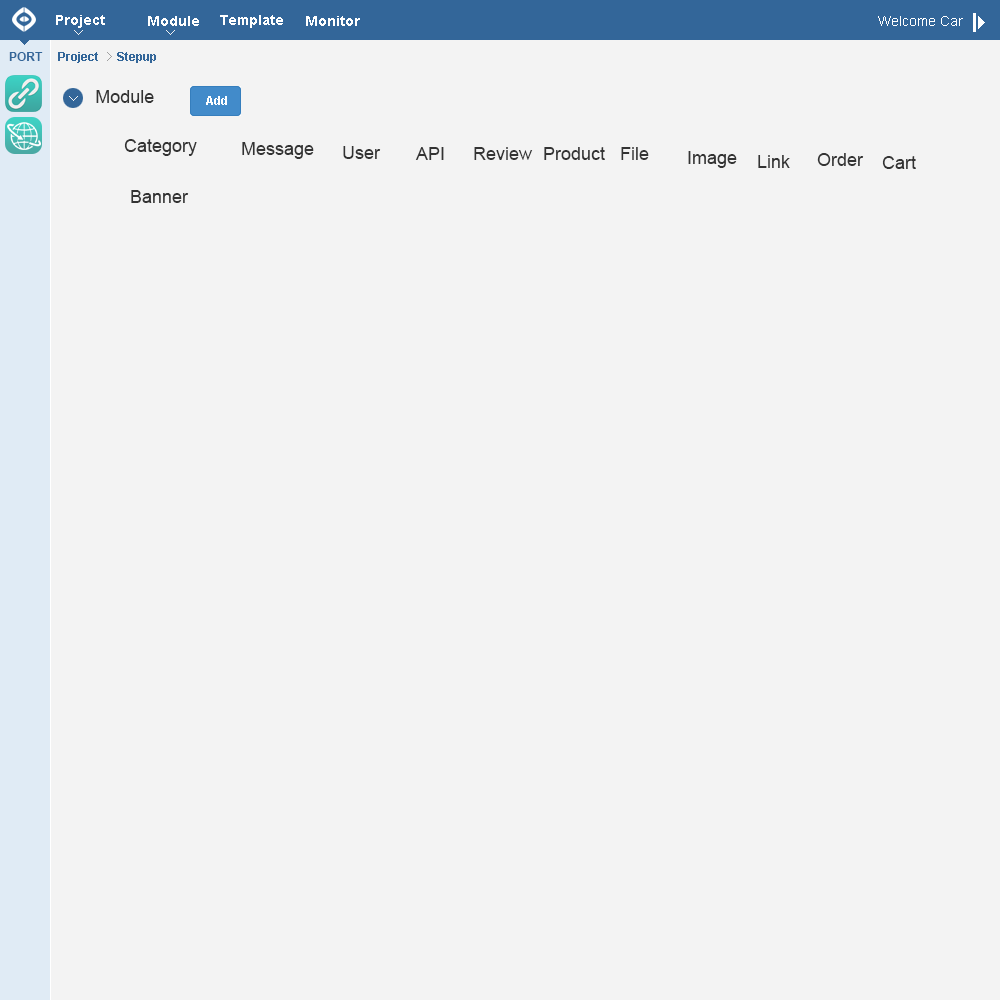
<style>
.page{position:relative;width:1000px;height:1000px;background:#f3f3f3}
.page>*{position:absolute;margin:0}
.t1{font:14px "Arial-BoldMT";color:#ffffff}
.t2{font:14px "ArialMT";color:#ffffff}
.t3{font:12px "Arial-BoldMT";color:#336699}
.t4{font:18px "ArialMT";color:#333333}
.t5{font:12px "Arial-BoldMT";color:#ffffff}
</style>
<div class="page">
<p class="t1" style="left:56px;top:15px;width:49px;height:13px">Project</p>
<p class="t1" style="left:148px;top:16px;width:51px;height:10px">Module</p>
<p class="t1" style="left:220px;top:15px;width:63px;height:13px">Template</p>
<p class="t1" style="left:306px;top:16px;width:54px;height:10px">Monitor</p>
<p class="t2" style="left:878px;top:16px;width:85px;height:10px">Welcome Car</p>
<p class="t3" style="left:9px;top:52px;width:34px;height:9px">PORT</p>
<p class="t3" style="left:58px;top:52px;width:40px;height:11px">Project</p>
<p class="t3" style="left:117px;top:52px;width:39px;height:11px">Stepup</p>
<p class="t4" style="left:96px;top:90px;width:58px;height:13px">Module</p>
<p class="t5" style="left:206px;top:96px;width:21px;height:9px">Add</p>
<p class="t4" style="left:124px;top:139px;width:73px;height:17px">Category</p>
<p class="t4" style="left:242px;top:142px;width:72px;height:17px">Message</p>
<p class="t4" style="left:343px;top:146px;width:38px;height:13px">User</p>
<p class="t4" style="left:415px;top:147px;width:29px;height:13px">API</p>
<p class="t4" style="left:474px;top:147px;width:59px;height:13px">Review</p>
<p class="t4" style="left:544px;top:147px;width:61px;height:13px">Product</p>
<p class="t4" style="left:621px;top:147px;width:28px;height:13px">File</p>
<p class="t4" style="left:688px;top:151px;width:49px;height:17px">Image</p>
<p class="t4" style="left:758px;top:155px;width:32px;height:13px">Link</p>
<p class="t4" style="left:817px;top:153px;width:47px;height:13px">Order</p>
<p class="t4" style="left:882px;top:156px;width:34px;height:13px">Cart</p>
<p class="t4" style="left:131px;top:190px;width:58px;height:13px">Banner</p>
</div>
